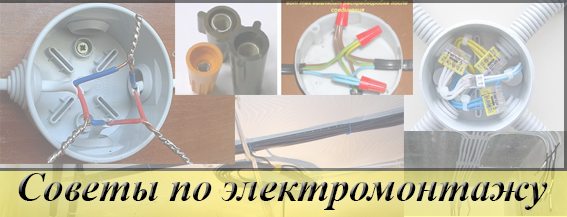
<style>
.page{position:relative;width:567px;height:217px}
.page>*{position:absolute;margin:0}
.t1{font:40.7px "TimesNewRomanPS-BoldItalicMT"}
</style>
<div class="page">
<p class="t1" style="left:18px;top:173px;width:530px;height:37px">Советы по электромонтажу</p>
</div>
